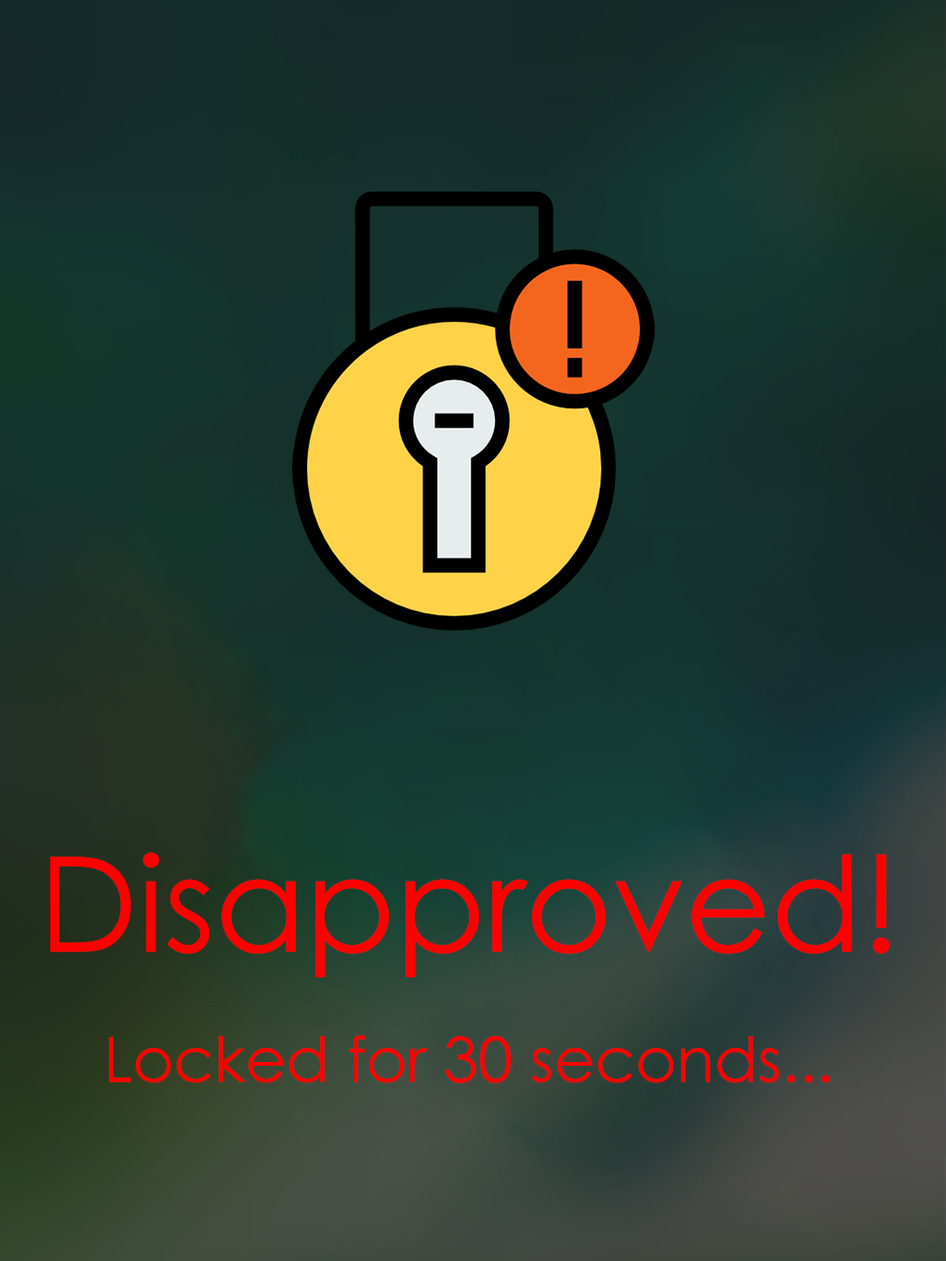
<style>
.page{position:relative;width:946px;height:1261px}
.page>*{position:absolute;margin:0}
.t1{font:132.1px "CenturyGothic";color:#ff0000}
.t2{font:62.6px "CenturyGothic";color:#ff0000}
</style>
<div class="page">
<p class="t1" style="left:50px;top:852px;width:839px;height:125px">Disapproved!</p>
<p class="t2" style="left:109px;top:1035px;width:720px;height:48px">Locked for 30 seconds...</p>
</div>
